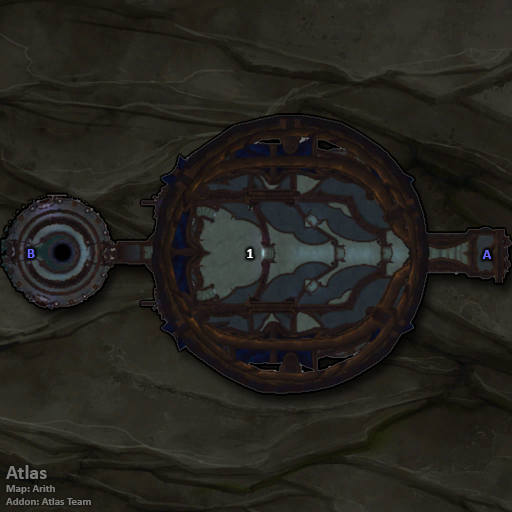
<style>
.page{position:relative;width:512px;height:512px}
.page>*{position:absolute;margin:0}
.t1{font:14px "Calibri-Bold";color:#6666ff}
.t2{font:14px "Calibri-Bold";color:#ffffff}
.t3{font:11px "Calibri-Bold";color:#7d7c7a}
.t4{font:20px "Calibri-Bold";color:#7d7c7a}
</style>
<div class="page">
<p class="t1" style="left:27px;top:249px;width:8px;height:9px">B</p>
<p class="t2" style="left:247px;top:249px;width:6px;height:9px">1</p>
<p class="t1" style="left:482px;top:250px;width:9px;height:9px">A</p>
<p class="t3" style="left:6px;top:465px;width:85px;height:40px"><span class="t4">Atlas<br></span>Map: Arith<br>Addon: Atlas Team</p>
</div>
